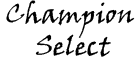
<style>
.page{position:relative;width:140px;height:58px;background:#ffffff}
.page>*{position:absolute;margin:0}
.t1{font:26.7px "VinerHandITC";color:#000000}
</style>
<div class="page">
<p class="t1" style="left:6px;top:0px;width:129px;height:57px;text-align:center">Champion <br>Select</p>
</div>
